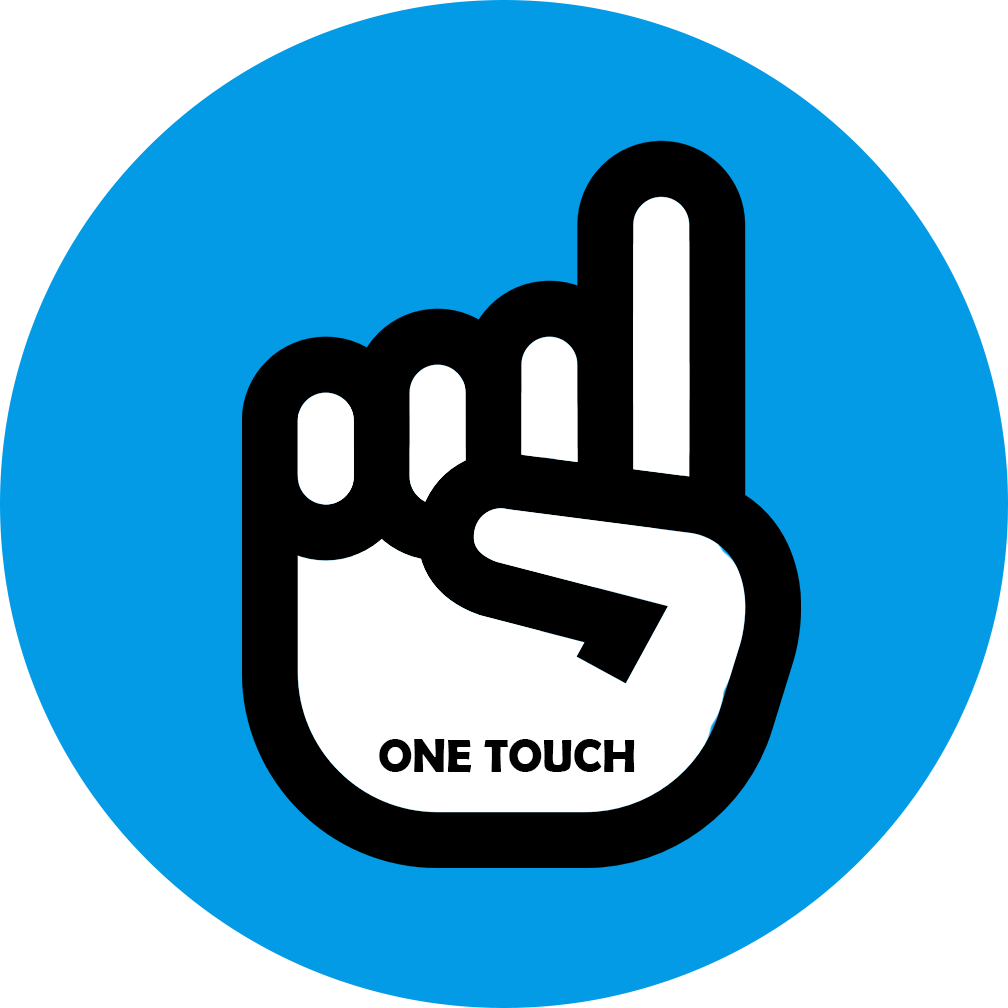
<style>
.page{position:relative;width:1008px;height:1008px;background:#039be5}
.page>*{position:absolute;margin:0}
.t1{font:45.8px "BerlinSansFBDemi-Bold";color:#000000}
</style>
<div class="page">
<p class="t1" style="left:379px;top:739px;width:256px;height:34px">ONE TOUCH</p>
</div>
